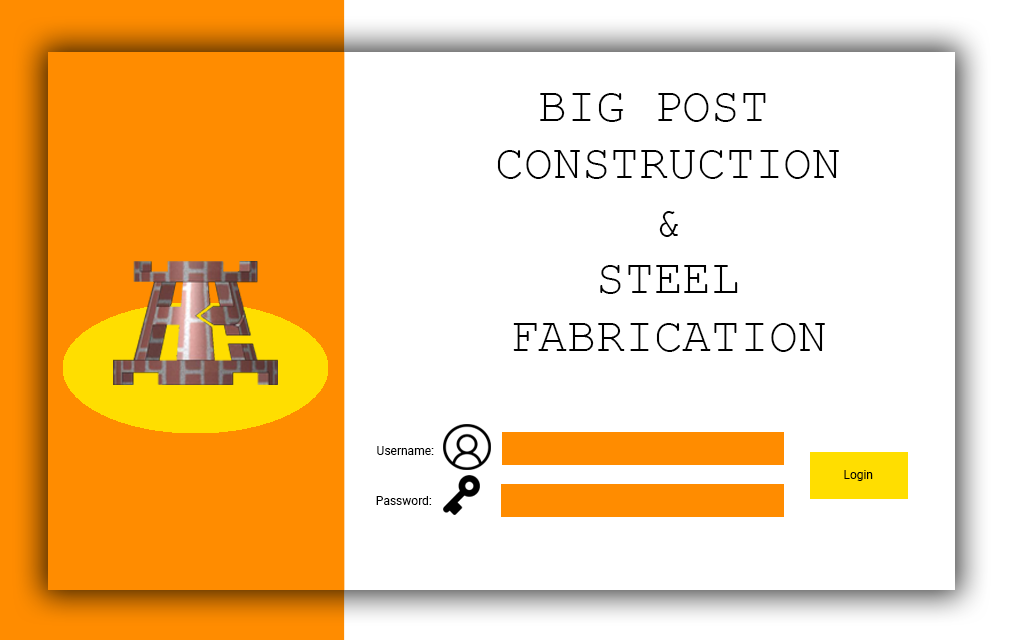
<style>
.page{position:relative;width:1020px;height:640px;background:#ffffff}
.page>*{position:absolute;margin:0}
.t1{font:48px "CourierNewPSMT";color:#000000}
.t2{font:12px "Roboto-Regular";color:#000000}
</style>
<div class="page">
<p class="t1" style="left:497px;top:93px;width:342px;height:259px;text-align:center">BIG POST <br>CONSTRUCTION<br>&amp;<br>STEEL<br>FABRICATION</p>
<p class="t2" style="left:377px;top:446px;width:57px;height:9px">Username:</p>
<p class="t2" style="left:844px;top:470px;width:29px;height:11px">Login</p>
<p class="t2" style="left:376px;top:496px;width:56px;height:9px">Password:</p>
</div>
